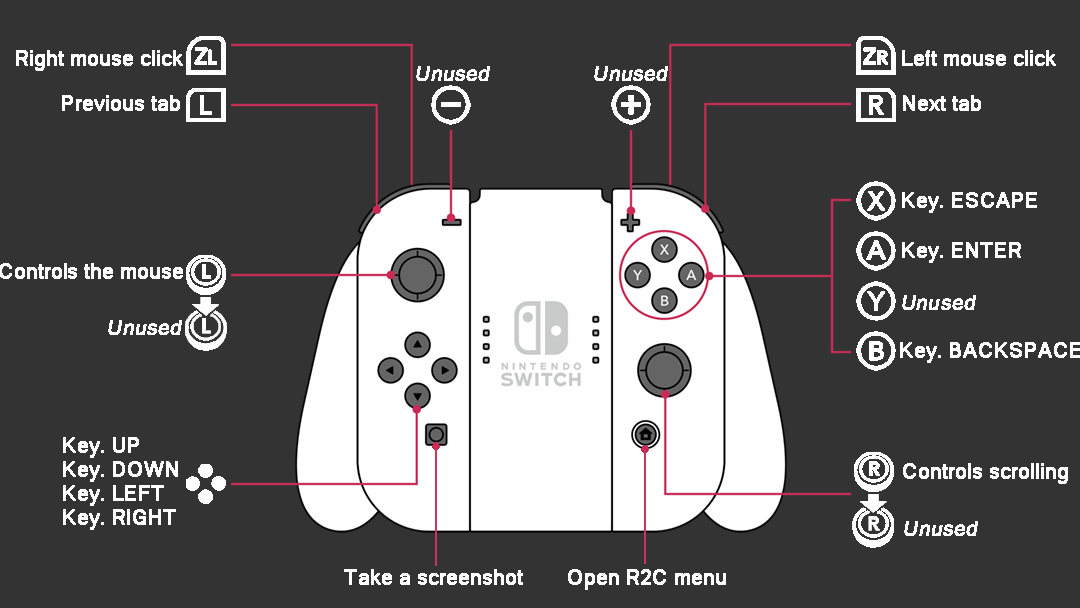
<style>
.page{position:relative;width:1080px;height:608px;background:#333333}
.page>*{position:absolute;margin:0}
.t1{font:20px "MicrosoftSansSerif";color:#ffffff;font-weight:bold}
.t2{font:20px "MicrosoftSansSerif";color:#ffffff;font-weight:bold;font-style:italic}
</style>
<div class="page">
<p class="t1" style="left:16px;top:50px;width:167px;height:21px">Right mouse click</p>
<p class="t1" style="left:902px;top:50px;width:154px;height:16px">Left mouse click</p>
<p class="t2" style="left:416px;top:66px;width:74px;height:15px">Unused</p>
<p class="t2" style="left:594px;top:66px;width:74px;height:15px">Unused</p>
<p class="t1" style="left:62px;top:95px;width:118px;height:16px">Previous tab</p>
<p class="t1" style="left:903px;top:95px;width:78px;height:16px">Next tab</p>
<p class="t1" style="left:902px;top:192px;width:135px;height:21px">Key. ESCAPE</p>
<p class="t1" style="left:902px;top:242px;width:119px;height:21px">Key. ENTER</p>
<p class="t1" style="left:0px;top:263px;width:183px;height:16px">Controls the mouse</p>
<p class="t2" style="left:902px;top:295px;width:74px;height:15px">Unused</p>
<p class="t2" style="left:108px;top:320px;width:74px;height:15px">Unused</p>
<p class="t1" style="left:900px;top:342px;width:181px;height:21px">Key. BACKSPACE</p>
<p class="t1" style="left:63px;top:437px;width:115px;height:93px">Key. UP<br>Key. DOWN<br>Key. LEFT<br>Key. RIGHT</p>
<p class="t1" style="left:903px;top:463px;width:165px;height:21px">Controls scrolling</p>
<p class="t2" style="left:904px;top:521px;width:74px;height:15px">Unused</p>
<p class="t1" style="left:344px;top:569px;width:179px;height:16px">Take a screenshot</p>
<p class="t1" style="left:568px;top:569px;width:158px;height:21px">Open R2C menu</p>
</div>
